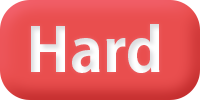
<style>
.page{position:relative;width:200px;height:100px}
.page>*{position:absolute;margin:0}
.t1{font:60px "AdobeGothicStd-Bold";color:#ffffff}
</style>
<div class="page">
<p class="t1" style="left:31px;top:24px;width:129px;height:49px">Hard</p>
</div>
